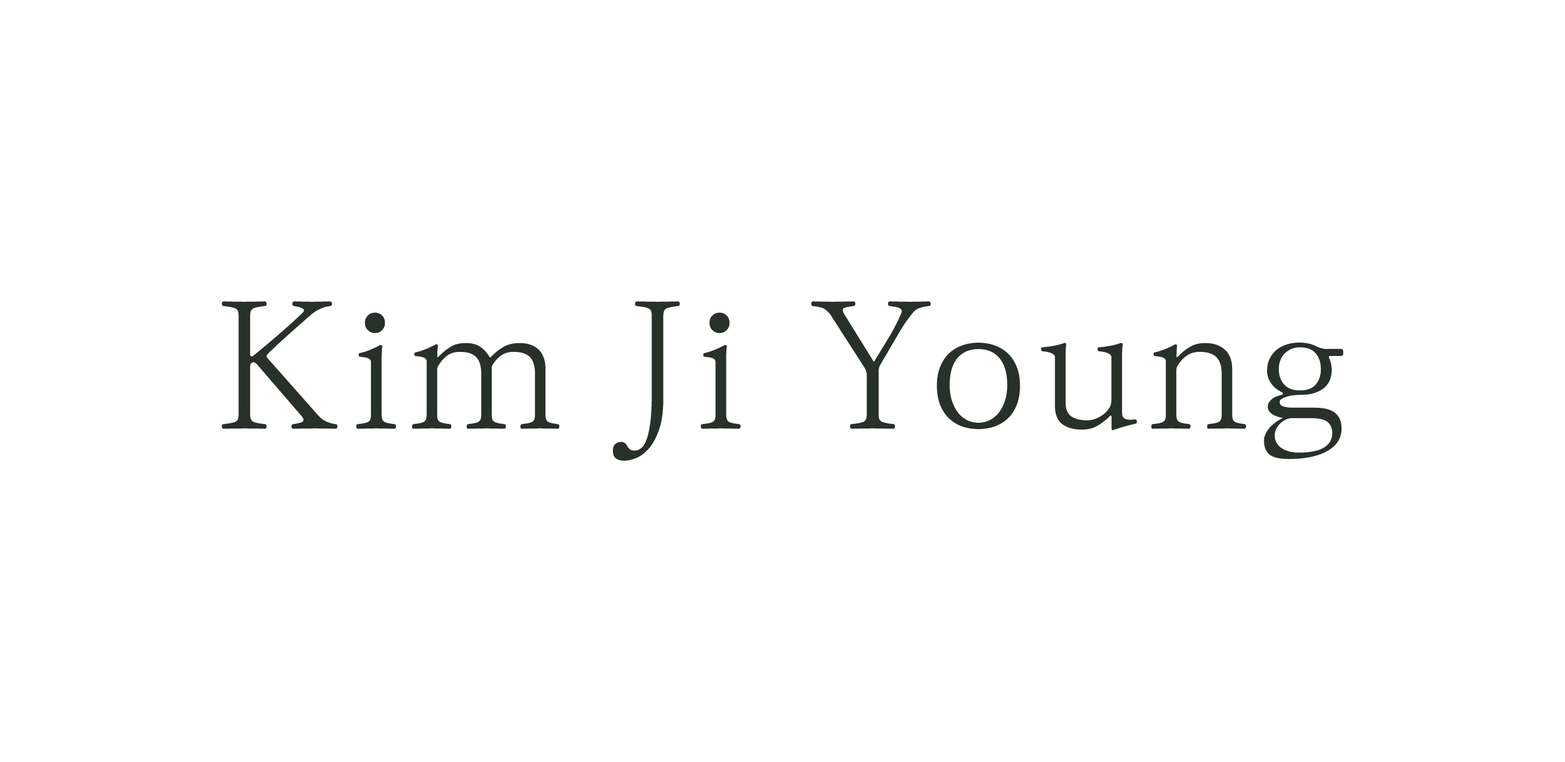
<style>
.page{position:relative;width:1565px;height:762px;background:#ffffff}
.page>*{position:absolute;margin:0}
.t1{font:172.8px "KoPubWorldBatangLight";letter-spacing:0.025em;color:#28302a}
</style>
<div class="page">
<p class="t1" style="left:222px;top:301px;width:1121px;height:160px">Kim Ji Young</p>
</div>
